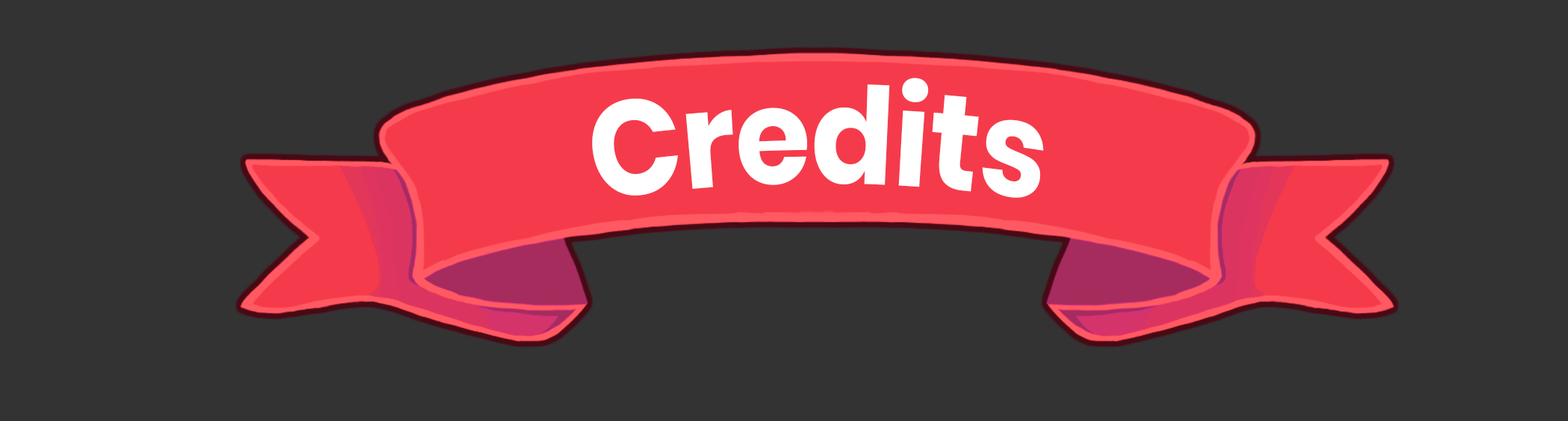
<style>
.page{position:relative;width:1568px;height:421px;background:#333333}
.page>*{position:absolute;margin:0}
.t1{font:134.4px "Poppins-Bold";color:#ffffff;scale:0.83 1}
</style>
<div class="page">
<p class="t1" style="left:592px;top:78px;width:452px;height:120px">Credits</p>
</div>
